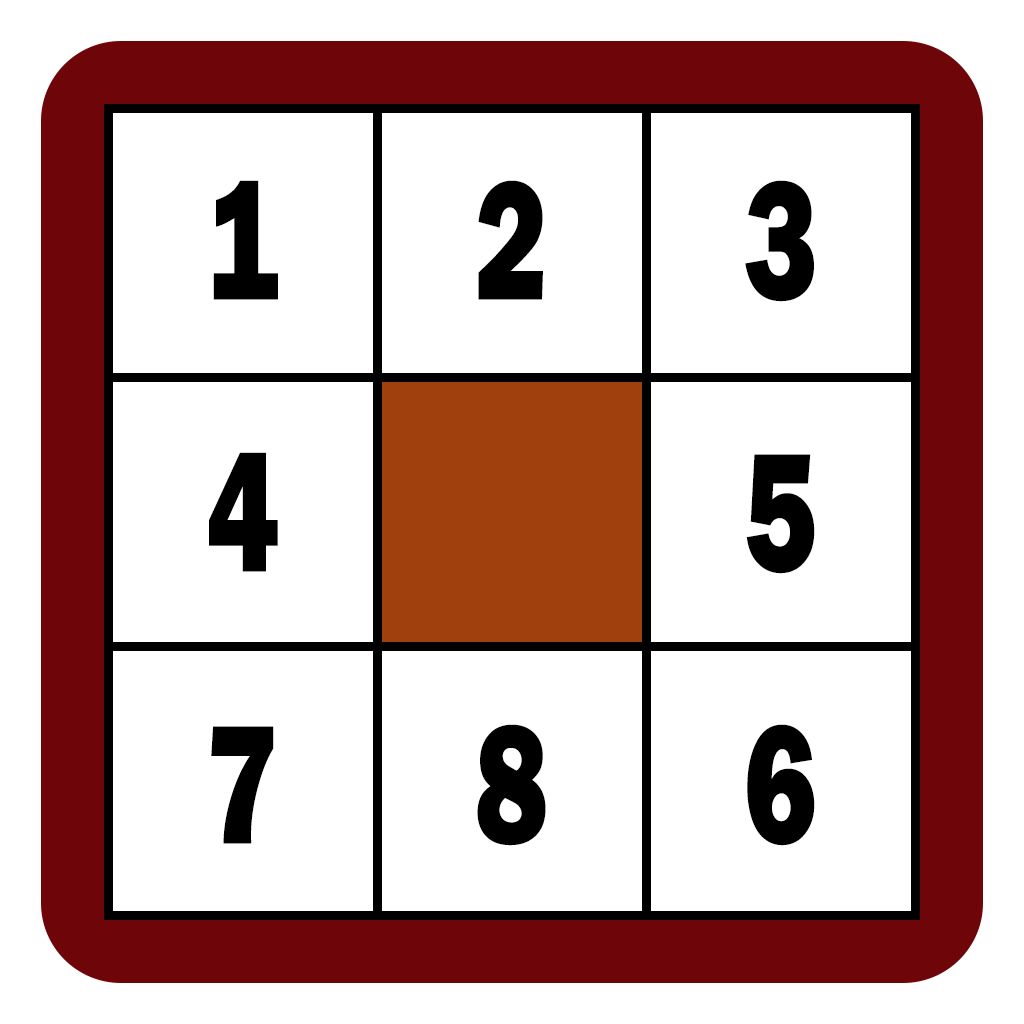
<style>
.page{position:relative;width:1024px;height:1024px;background:#ffffff}
.page>*{position:absolute;margin:0}
.t1{font:175px "FranklinGothic-Heavy";color:#000000;scale:0.71 1}
</style>
<div class="page">
<p class="t1" style="left:213px;top:180px;width:65px;height:120px">1</p>
<p class="t1" style="left:478px;top:180px;width:65px;height:120px">2</p>
<p class="t1" style="left:745px;top:180px;width:69px;height:122px">3</p>
<p class="t1" style="left:209px;top:452px;width:69px;height:120px">4</p>
<p class="t1" style="left:746px;top:454px;width:69px;height:120px">5</p>
<p class="t1" style="left:211px;top:726px;width:63px;height:118px">7</p>
<p class="t1" style="left:477px;top:724px;width:69px;height:122px">8</p>
<p class="t1" style="left:747px;top:724px;width:68px;height:122px">6</p>
</div>
